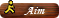
<style>
.page{position:relative;width:59px;height:18px}
.page>*{position:absolute;margin:0}
.t1{font:12px "MonotypeCorsiva";letter-spacing:0.025em;color:#ffffff;font-style:italic}
</style>
<div class="page">
<p class="t1" style="left:24px;top:7px;width:21px;height:8px">Aim</p>
</div>
